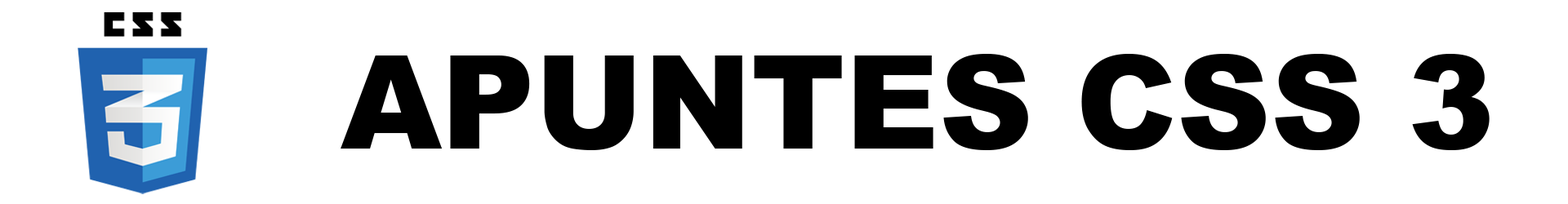
<style>
.page{position:relative;width:1568px;height:204px;background:#ffffff}
.page>*{position:absolute;margin:0}
.t1{font:129.8px "Arial-Black";color:#000000}
</style>
<div class="page">
<p class="t1" style="left:341px;top:54px;width:1149px;height:96px">APUNTES CSS 3</p>
</div>
